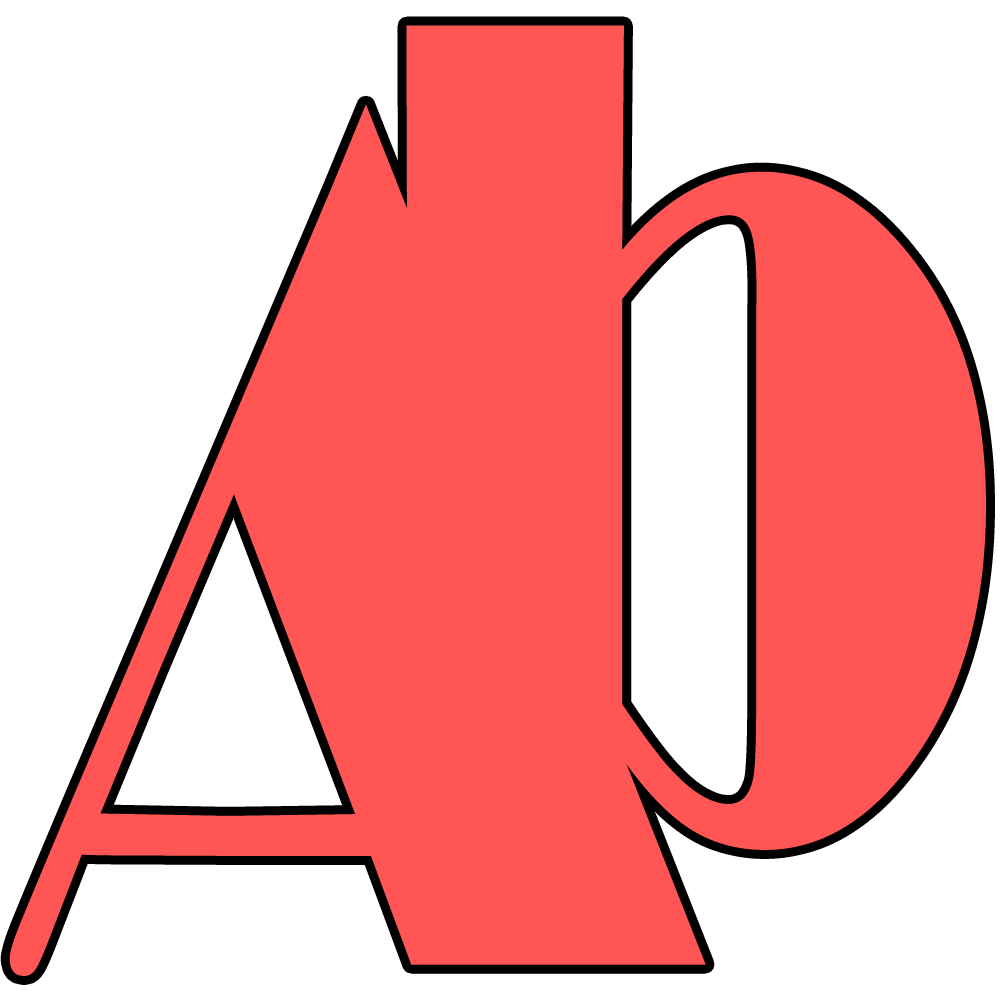
<style>
.page{position:relative;width:1000px;height:1000px;background:#ffffff}
.page>*{position:absolute;margin:0}
.t1{font:1217px "Broadway";color:#ff5555;scale:0.71 1}
</style>
<div class="page">
<p class="t1" style="left:406px;top:25px;width:580px;height:825px">b</p>
<p class="t1" style="left:9px;top:104px;width:697px;height:872px">A</p>
</div>
